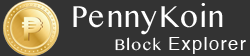
<style>
.page{position:relative;width:250px;height:56px;background:#333333}
.page>*{position:absolute;margin:0}
.t1{font:35.8px "KhmerMN";letter-spacing:0.05em;color:#ffffff;scale:0.93 1}
.t2{font:18.3px "Helvetica";letter-spacing:0.075em;color:#ffffff}
.t3{font:18.3px "KhmerMN";letter-spacing:0.075em;color:#ffffff}
</style>
<div class="page">
<p class="t1" style="left:73px;top:3px;width:150px;height:32px">PennyKoin</p>
<p class="t2" style="left:115px;top:37px;width:131px;height:17px"><span class="t3">Block </span>Explorer</p>
</div>
